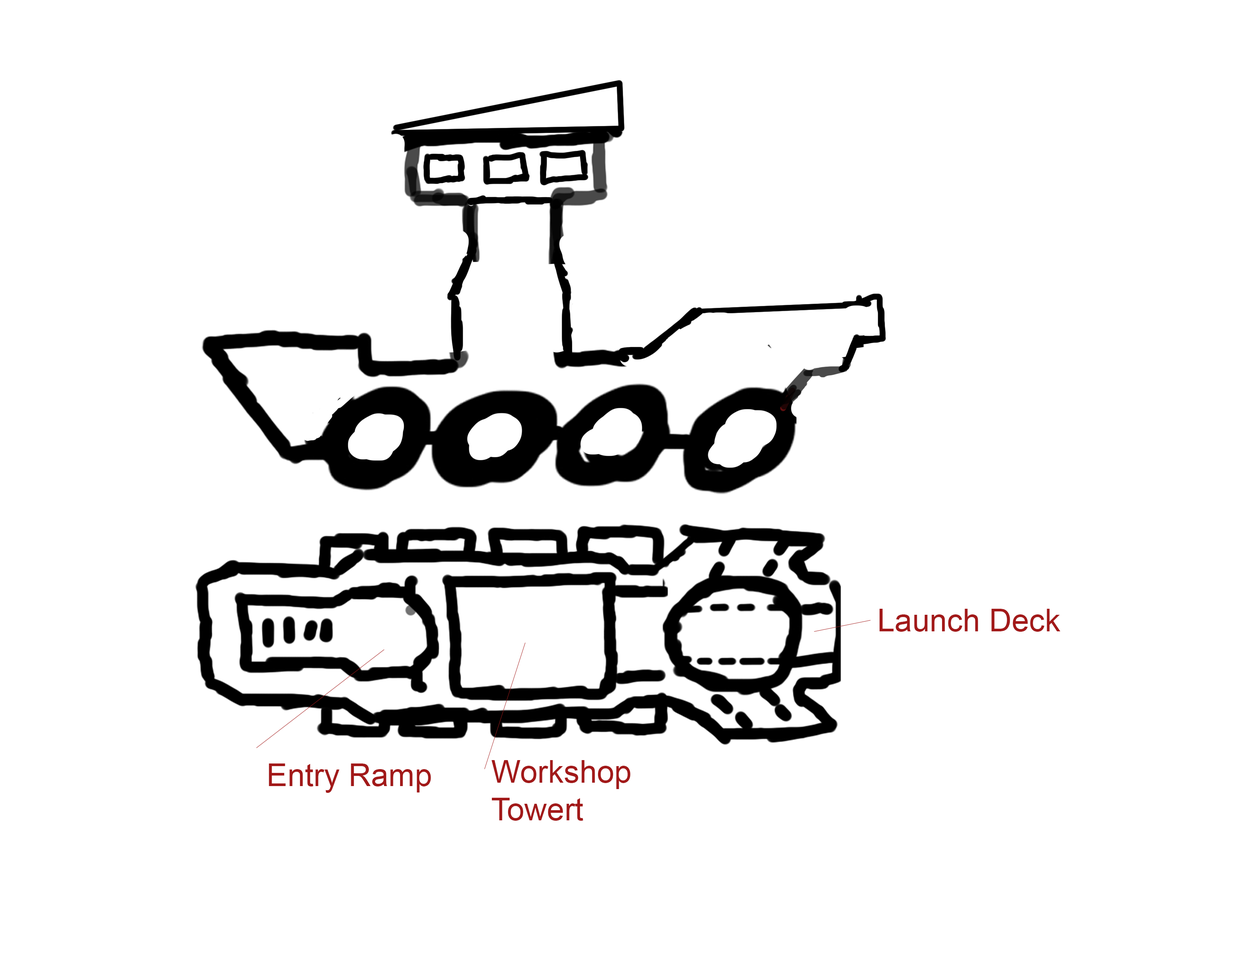
<style>
.page{position:relative;width:1242px;height:960px;background:#ffffff}
.page>*{position:absolute;margin:0}
.t1{font:31.4px "ArialMT";color:#a21919}
</style>
<div class="page">
<p class="t1" style="left:880px;top:609px;width:181px;height:23px">Launch Deck</p>
<p class="t1" style="left:492px;top:760px;width:139px;height:61px">Workshop <br>Towert</p>
<p class="t1" style="left:269px;top:763px;width:162px;height:30px">Entry Ramp</p>
</div>
